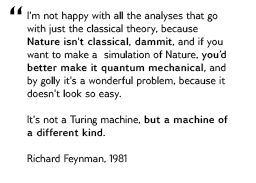
<style>
.page{position:relative;width:256px;height:183px;background:#ffffff}
.page>*{position:absolute;margin:0}
.t1{font:43.2px "GilliusADFNo2-Regular";color:#000000}
.t2{font:10.8px "GilliusADFNo2-Regular";color:#000000}
.t3{font:10.8px "GilliusADFNo2-Bold";color:#000000}
</style>
<div class="page">
<p class="t1" style="left:10px;top:6px;width:13px;height:9px">“</p>
<p class="t2" style="left:27px;top:11px;width:201px;height:154px">I'm not happy with all the analyses that go <br>with just the classical theory, because<span class="t3"> <br>Nature isn't classical, dammit</span>, and if you <br>want to make a  simulation of Nature, <span class="t3">you’d <br>better make it quantum mechanical,</span> and <br>by golly it's a wonderful problem, because it <br>doesn't look so easy.<br><br>It's not a Turing machine, <span class="t3">but a machine of <br>a different kind.<br></span><br>Richard Feynman, 1981</p>
</div>
